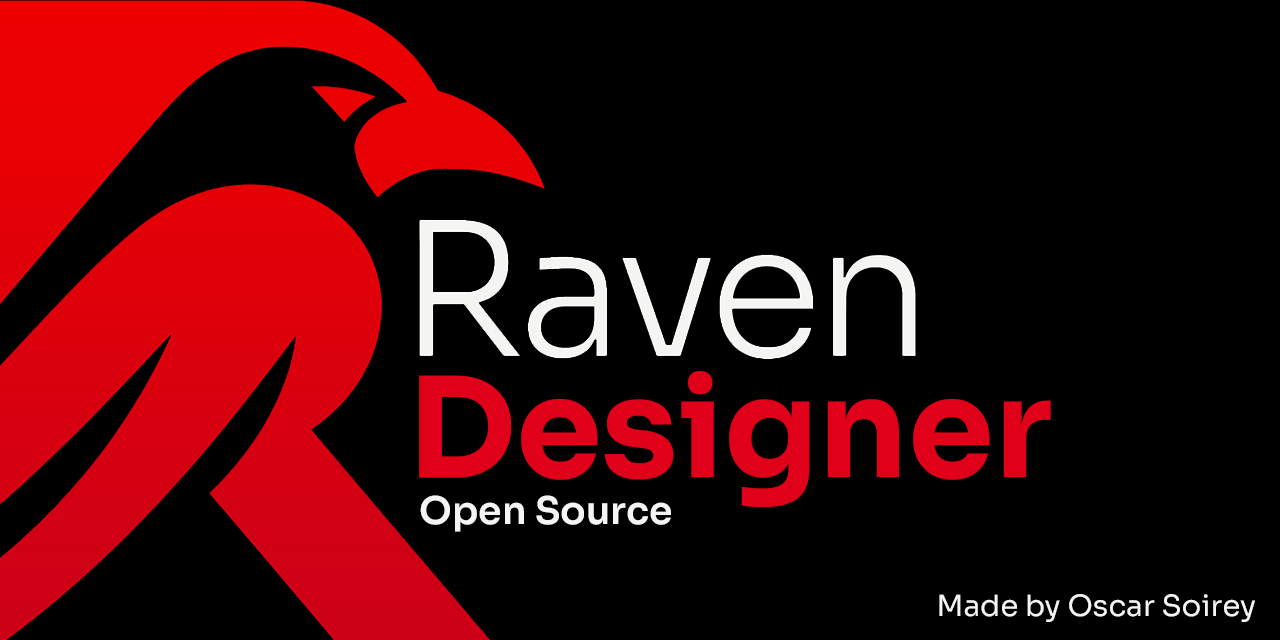
<style>
.page{position:relative;width:1280px;height:640px;background:#000000}
.page>*{position:absolute;margin:0}
.t1{font:137.6px "Sora-Bold";color:#e10019}
.t2{font:37.9px "Sora-SemiBold";color:#f5f5f5}
.t3{font:29.2px "Sora-Regular";color:#f5f5f5}
</style>
<div class="page">
<p class="t1" style="left:419px;top:371px;width:632px;height:136px">Designer</p>
<p class="t2" style="left:420px;top:495px;width:251px;height:37px">Open Source</p>
<p class="t3" style="left:939px;top:594px;width:316px;height:28px">Made by Oscar Soirey</p>
</div>
